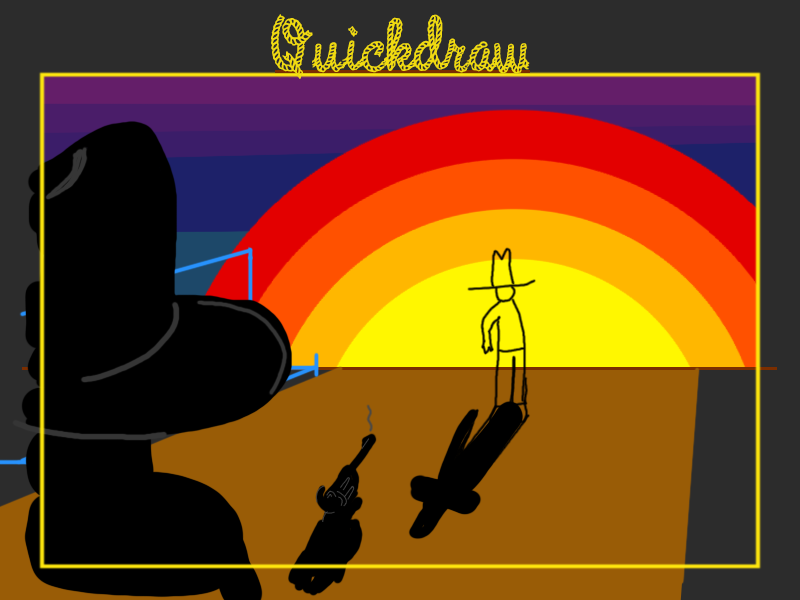
<style>
.page{position:relative;width:800px;height:600px;background:#2c2c2c}
.page>*{position:absolute;margin:0}
.t1{font:85px "RopeMF";color:#f0db10}
</style>
<div class="page">
<p class="t1" style="left:271px;top:14px;width:259px;height:65px">Quickdraw</p>
</div>
